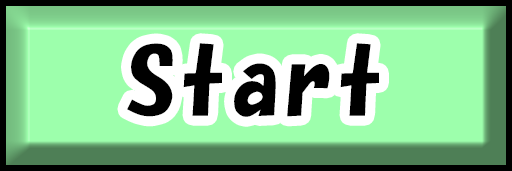
<style>
.page{position:relative;width:512px;height:171px;background:#9dffac}
.page>*{position:absolute;margin:0}
.t1{font:90px "HGPSoeiKakupoptai";letter-spacing:0.08em;color:#000000}
</style>
<div class="page">
<p class="t1" style="left:127px;top:43px;width:252px;height:74px">Start</p>
</div>
